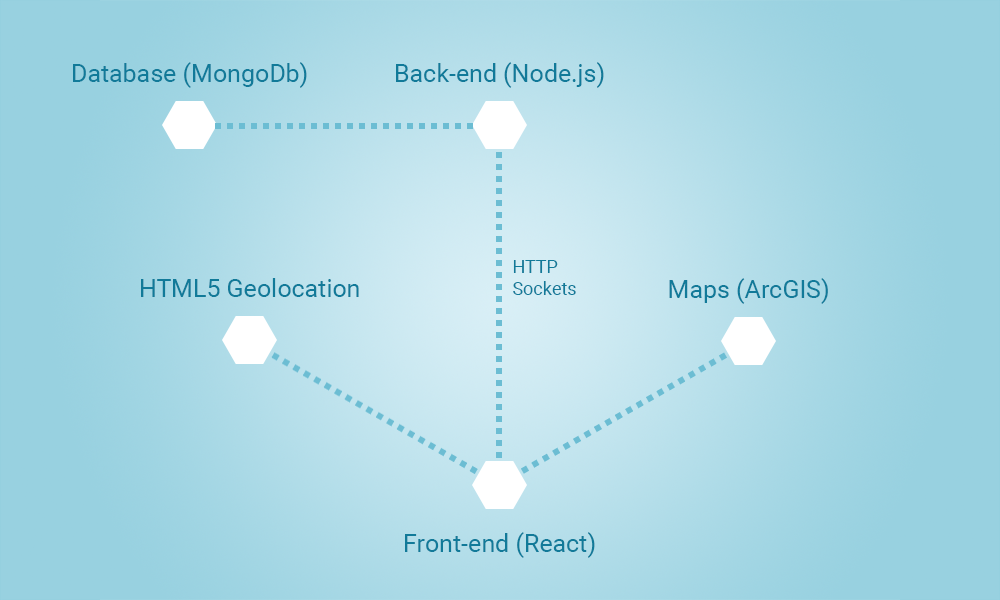
<style>
.page{position:relative;width:1000px;height:600px}
.page>*{position:absolute;margin:0}
.t1{font:25px "Roboto-Regular";color:#117a99}
.t2{font:18px "Roboto-Regular";color:#117a99}
</style>
<div class="page">
<p class="t1" style="left:73px;top:62px;width:234px;height:26px">Database (MongoDb)</p>
<p class="t1" style="left:396px;top:62px;width:208px;height:26px">Back-end (Node.js)</p>
<p class="t2" style="left:513px;top:260px;width:63px;height:35px">HTTP<br>Sockets</p>
<p class="t1" style="left:141px;top:278px;width:218px;height:19px">HTML5 Geolocation</p>
<p class="t1" style="left:669px;top:278px;width:159px;height:26px">Maps (ArcGIS)</p>
<p class="t1" style="left:405px;top:532px;width:190px;height:26px">Front-end (React)</p>
</div>
